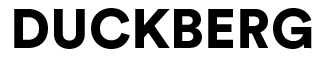
<style>
.page{position:relative;width:326px;height:57px;background:#ffffff}
.page>*{position:absolute;margin:0}
.t1{font:55px "CircularStd-Black";color:#000000}
</style>
<div class="page">
<p class="t1" style="left:14px;top:8px;width:298px;height:41px">DUCKBERG</p>
</div>
